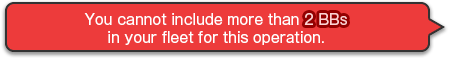
<style>
.page{position:relative;width:450px;height:58px;background:#ed3b3b}
.page>*{position:absolute;margin:0}
.t1{font:14px/18px "GothicMB101Pro-Regular";color:#ffffff}
.t2{font:14px/18px "GothicMB101Pro-Regular";color:#ffd3d3}
</style>
<div class="page">
<p class="t1" style="left:84px;top:13px;width:263px;height:32px;text-align:center">You cannot include more than <span class="t2">2 BBs<br></span>in your fleet for this operation.</p>
<p class="t1" style="left:84px;top:13px;width:263px;height:32px;text-align:center">You cannot include more than <span class="t2">2 BBs<br></span>in your fleet for this operation.</p>
</div>
